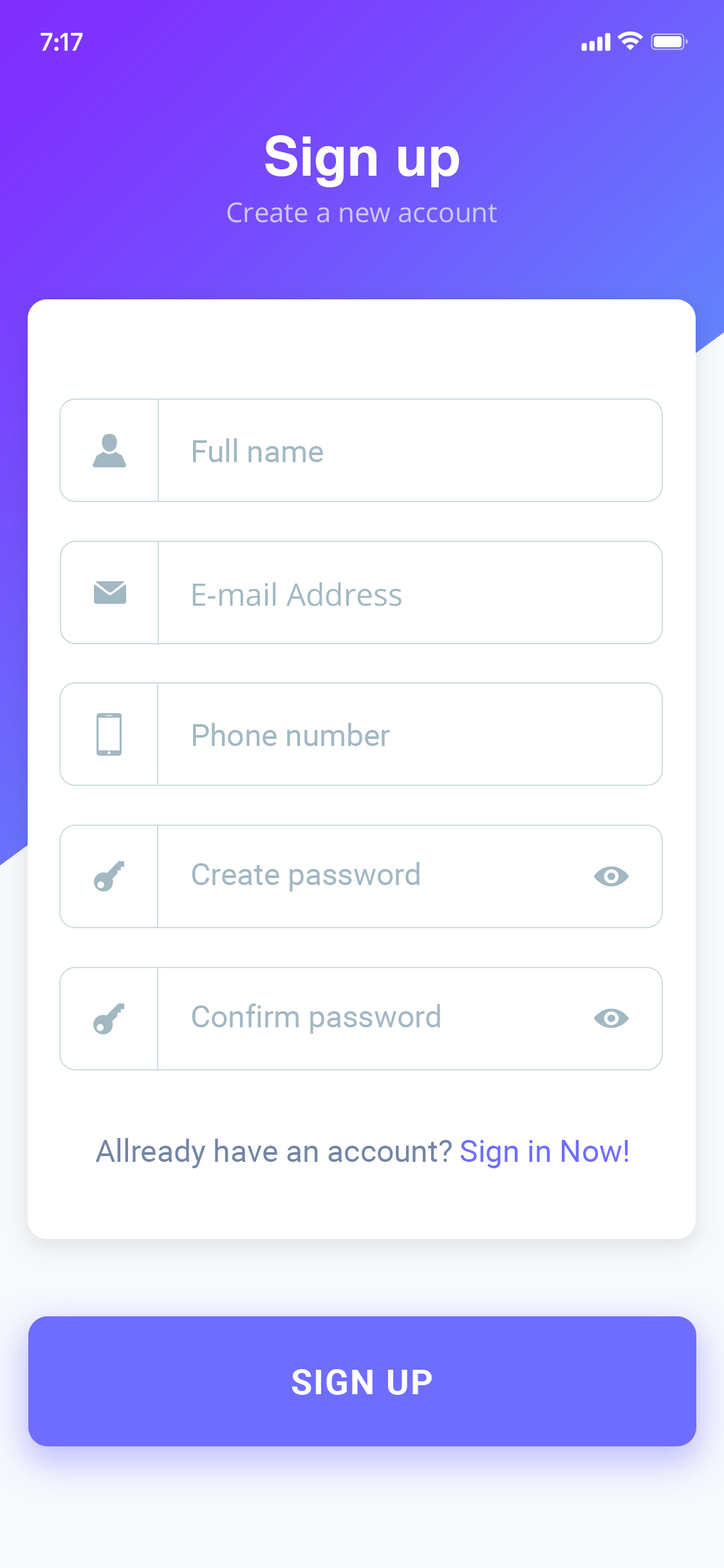
<style>
.page{position:relative;width:724px;height:1568px;background:#ffffff}
.page>*{position:absolute;margin:0}
.t1{font:54.1px "Helvetica-Bold";color:#ffffff}
.t2{font:27px "OpenSans";color:#cdc5ff}
.t3{font:30.9px "Roboto-Regular";color:#a1b7c2}
.t4{font:30.9px "OpenSans";color:#a1b7c2}
.t5{font:30.9px "Roboto-Regular";color:#7083a4}
.t6{font:30.9px "Roboto-Regular";color:#6f6dff}
.t7{font:34.8px "Roboto-Bold";letter-spacing:0.04em;color:#ffffff}
</style>
<div class="page">
<p class="t1" style="left:265px;top:135px;width:195px;height:52px">Sign up</p>
<p class="t2" style="left:227px;top:202px;width:270px;height:21px">Create a new account</p>
<p class="t3" style="left:193px;top:438px;width:130px;height:24px">Full name</p>
<p class="t4" style="left:192px;top:582px;width:210px;height:24px">E-mail Address</p>
<p class="t3" style="left:193px;top:723px;width:197px;height:23px">Phone number</p>
<p class="t3" style="left:192px;top:862px;width:228px;height:29px">Create password</p>
<p class="t3" style="left:192px;top:1003px;width:248px;height:31px">Confirm password</p>
<p class="t5" style="left:95px;top:1138px;width:357px;height:30px">Allready have an account?</p>
<p class="t6" style="left:460px;top:1140px;width:168px;height:28px">Sign in Now!</p>
<p class="t7" style="left:292px;top:1369px;width:140px;height:26px">SIGN UP</p>
</div>
